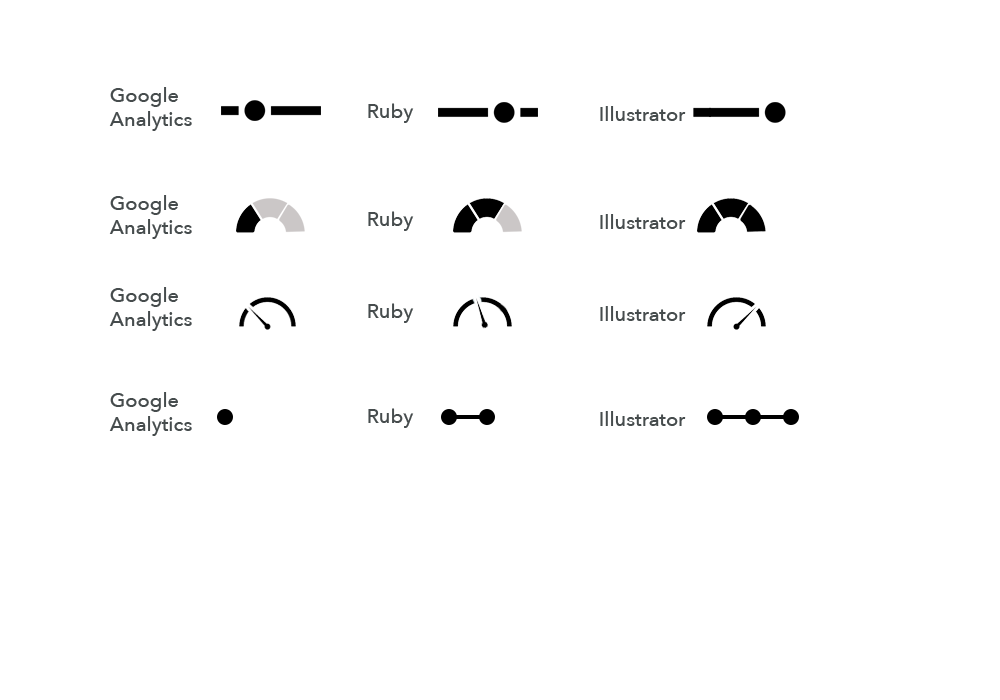
<style>
.page{position:relative;width:1000px;height:700px;background:#ffffff}
.page>*{position:absolute;margin:0}
.t1{font:20px "AvenirNext-Medium";color:#464c4d}
</style>
<div class="page">
<p class="t1" style="left:109px;top:87px;width:83px;height:44px">Google<br>Analytics</p>
<p class="t1" style="left:368px;top:103px;width:46px;height:20px">Ruby</p>
<p class="t1" style="left:600px;top:106px;width:86px;height:15px">Illustrator</p>
<p class="t1" style="left:109px;top:195px;width:83px;height:44px">Google<br>Analytics</p>
<p class="t1" style="left:368px;top:211px;width:46px;height:20px">Ruby</p>
<p class="t1" style="left:600px;top:214px;width:86px;height:15px">Illustrator</p>
<p class="t1" style="left:109px;top:287px;width:83px;height:44px">Google<br>Analytics</p>
<p class="t1" style="left:368px;top:303px;width:46px;height:20px">Ruby</p>
<p class="t1" style="left:600px;top:306px;width:86px;height:15px">Illustrator</p>
<p class="t1" style="left:109px;top:392px;width:83px;height:44px">Google<br>Analytics</p>
<p class="t1" style="left:368px;top:408px;width:46px;height:20px">Ruby</p>
<p class="t1" style="left:600px;top:411px;width:86px;height:15px">Illustrator</p>
</div>
